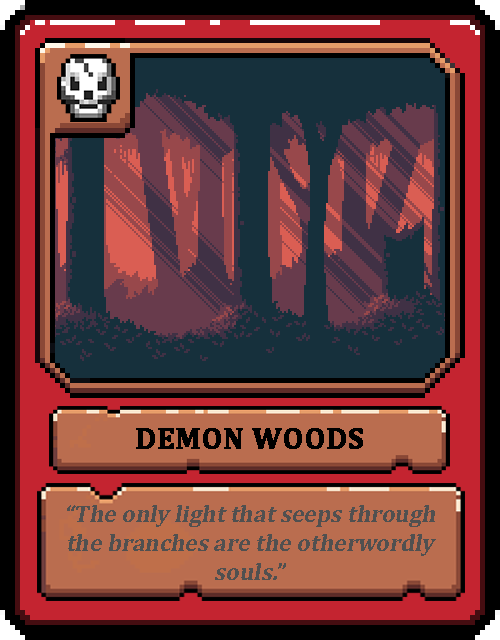
<style>
.page{position:relative;width:500px;height:640px}
.page>*{position:absolute;margin:0}
.t1{font:30px "Cambria-Bold";color:#000000;text-transform:uppercase;font-weight:bold}
.t2{font:24px "Cambria-Bold";color:#505050;font-style:italic}
</style>
<div class="page">
<p class="t1" style="left:136px;top:428px;width:227px;height:21px">Demon woods</p>
<p class="t2" style="left:67px;top:505px;width:369px;height:75px;text-align:center">“The only light that seeps through the branches are the otherwordly souls.”</p>
</div>
